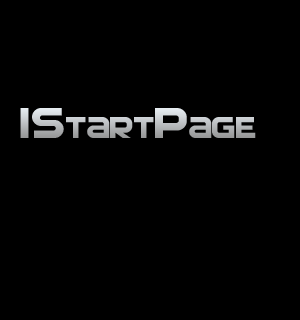
<style>
.page{position:relative;width:300px;height:320px;background:#000000}
.page>*{position:absolute;margin:0}
.t1{font:44.6px "SFAutomaton";letter-spacing:0.045em;font-variant:small-caps;scale:1.06 1}
</style>
<div class="page">
<p class="t1" style="left:20px;top:108px;width:236px;height:30px">IStartPage</p>
</div>
